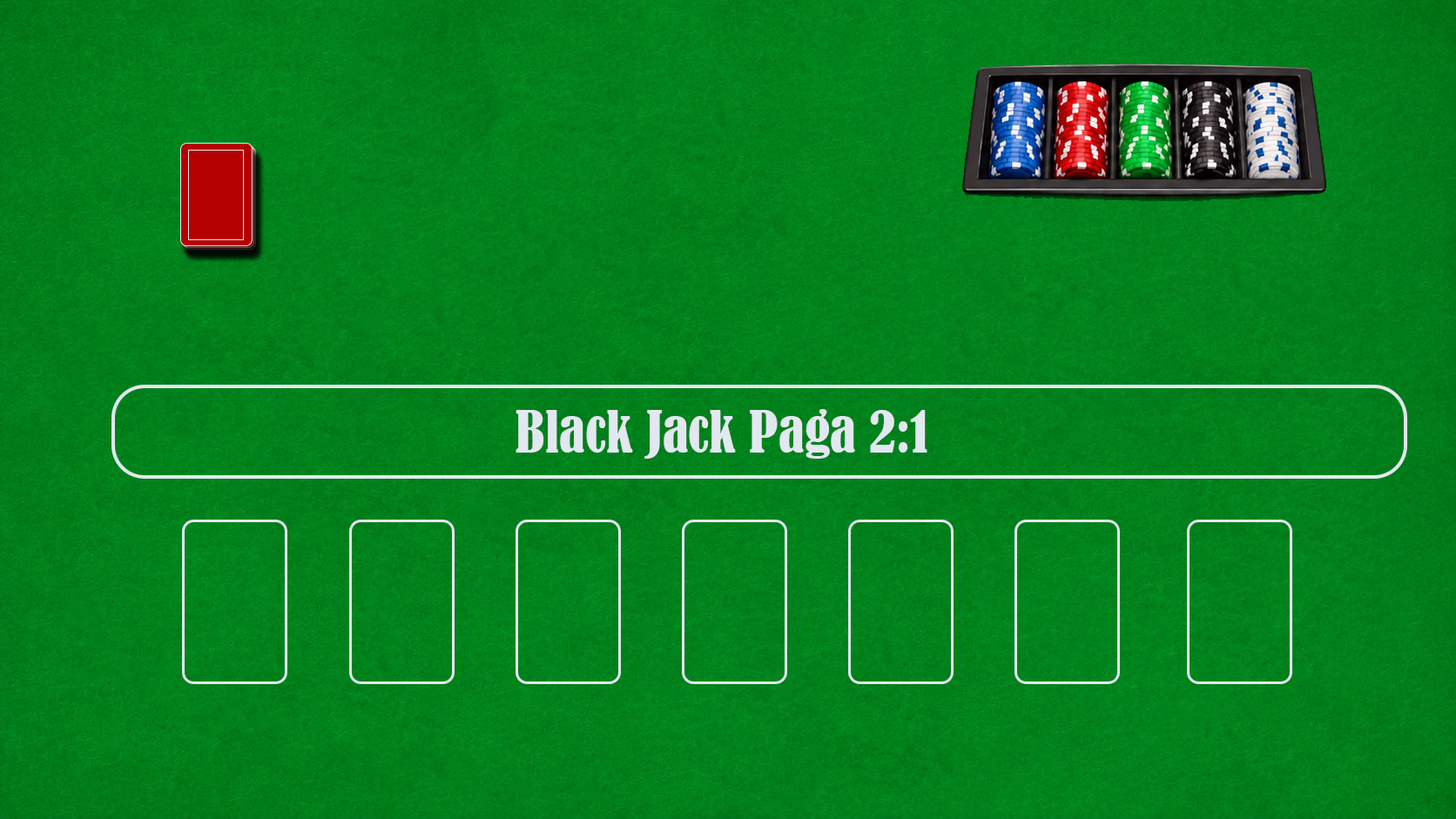
<style>
.page{position:relative;width:1456px;height:819px}
.page>*{position:absolute;margin:0}
.t1{font:54px "BernardMT-Condensed";color:#e2e8f0}
</style>
<div class="page">
<p class="t1" style="left:515px;top:409px;width:412px;height:50px">Black Jack Paga 2:1</p>
</div>
